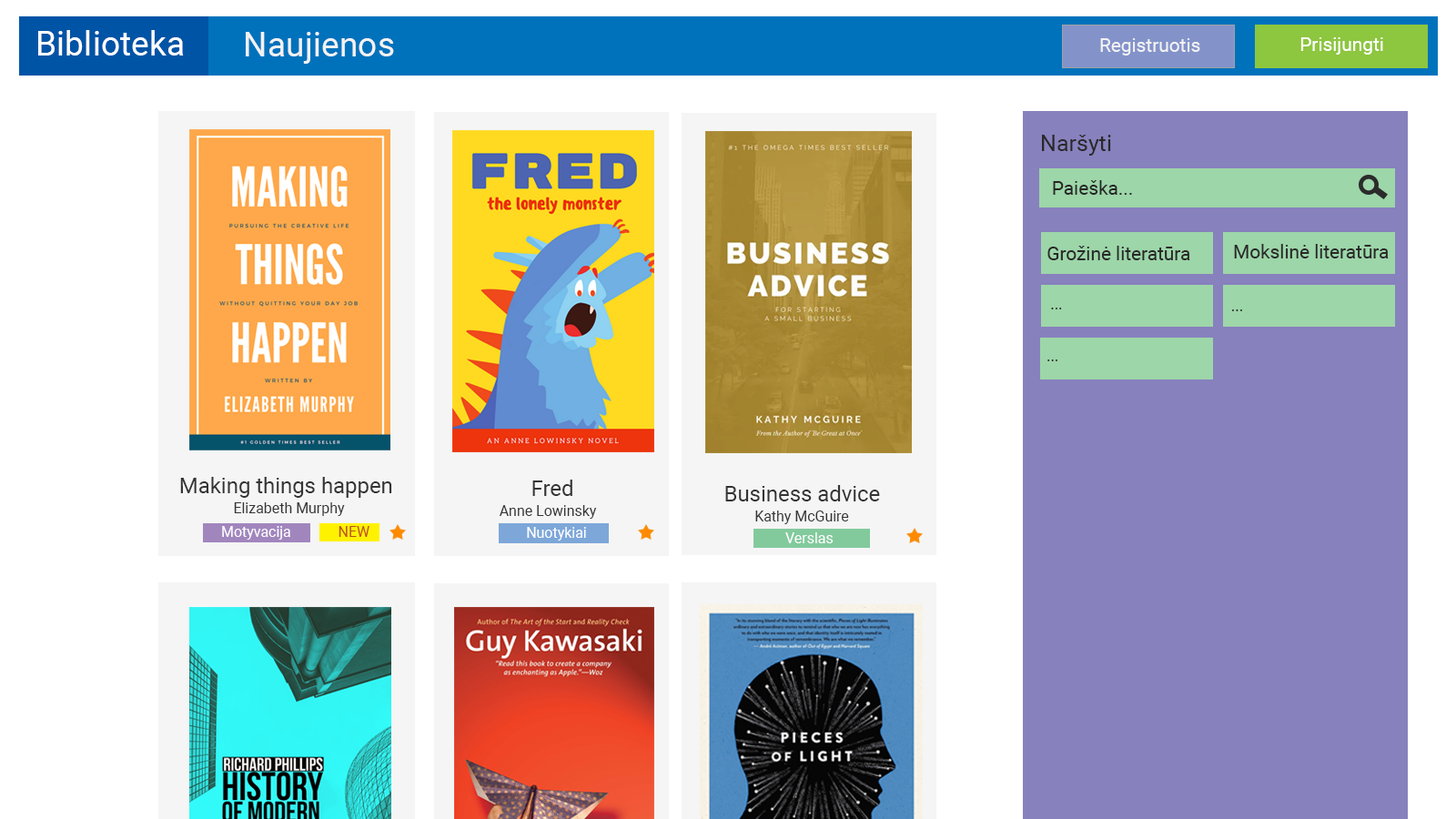
<style>
.page{position:relative;width:1456px;height:819px;background:#ffffff}
.page>*{position:absolute;margin:0}
.t1{font:34.1px "Roboto-Regular";color:#ffffff}
.t2{font:34.1px "Roboto-Regular";color:#f2f2f2}
.t3{font:19px "Roboto-Regular";color:#f2f2f2}
.t4{font:19px "Roboto-Regular";color:#ffffff}
.t5{font:22.7px "Roboto-Regular";color:#292929}
.t6{font:19px "Roboto-Regular";color:#262626}
.t7{font:19px "Roboto-Regular";color:#292929}
.t8{font:15.2px "Roboto-Regular";color:#292929}
.t9{font:21.7px "Roboto-Regular";color:#343434}
.t10{font:14.5px "Roboto-Regular";color:#343434}
.t11{font:14.5px "Roboto-Regular";color:#ffffff}
.t12{font:14.5px "Roboto-Regular";color:#bd4e22}
</style>
<div class="page">
<p class="t1" style="left:38px;top:30px;width:146px;height:26px">Biblioteka</p>
<p class="t2" style="left:246px;top:32px;width:148px;height:32px">Naujienos</p>
<p class="t3" style="left:1100px;top:38px;width:100px;height:18px">Registruotis</p>
<p class="t4" style="left:1300px;top:37px;width:83px;height:18px">Prisijungti</p>
<p class="t5" style="left:1042px;top:135px;width:69px;height:21px">Naršyti</p>
<p class="t6" style="left:1053px;top:180px;width:79px;height:15px">Paieška...</p>
<p class="t7" style="left:1047px;top:246px;width:143px;height:14px">Grožinė literatūra</p>
<p class="t7" style="left:1234px;top:244px;width:155px;height:14px">Mokslinė literatūra</p>
<p class="t8" style="left:1051px;top:308px;width:11px;height:1px">...</p>
<p class="t8" style="left:1232px;top:309px;width:10px;height:2px">...</p>
<p class="t8" style="left:1047px;top:359px;width:10px;height:2px">...</p>
<p class="t9" style="left:180px;top:477px;width:212px;height:21px">Making things happen</p>
<p class="t9" style="left:532px;top:480px;width:40px;height:16px">Fred</p>
<p class="t9" style="left:725px;top:485px;width:155px;height:16px">Business advice</p>
<p class="t10" style="left:234px;top:502px;width:111px;height:14px">Elizabeth Murphy</p>
<p class="t10" style="left:500px;top:505px;width:97px;height:14px">Anne Lowinsky</p>
<p class="t10" style="left:755px;top:511px;width:94px;height:13px">Kathy McGuire</p>
<p class="t11" style="left:222px;top:526px;width:68px;height:14px">Motyvacija</p>
<p class="t12" style="left:339px;top:526px;width:30px;height:11px">NEW</p>
<p class="t11" style="left:527px;top:527px;width:59px;height:14px">Nuotykiai</p>
<p class="t11" style="left:785px;top:532px;width:49px;height:11px">Verslas</p>
</div>
